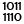
<style>
.page{position:relative;width:24px;height:24px;background:#ffffff}
.page>*{position:absolute;margin:0}
.t1{font:13.3px "BerlinSansFB-Reg";color:#000000}
</style>
<div class="page">
<p class="t1" style="left:2px;top:2px;width:19px;height:8px">1011</p>
<p class="t1" style="left:3px;top:13px;width:19px;height:8px">1110</p>
</div>
